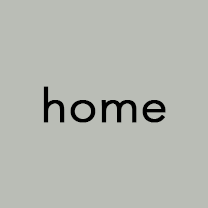
<style>
.page{position:relative;width:208px;height:208px;background:#babdb6}
.page>*{position:absolute;margin:0}
.t1{font:48px "Avenir-Light";color:#000000;font-weight:bold}
</style>
<div class="page">
<p class="t1" style="left:43px;top:86px;width:123px;height:37px">home</p>
</div>
